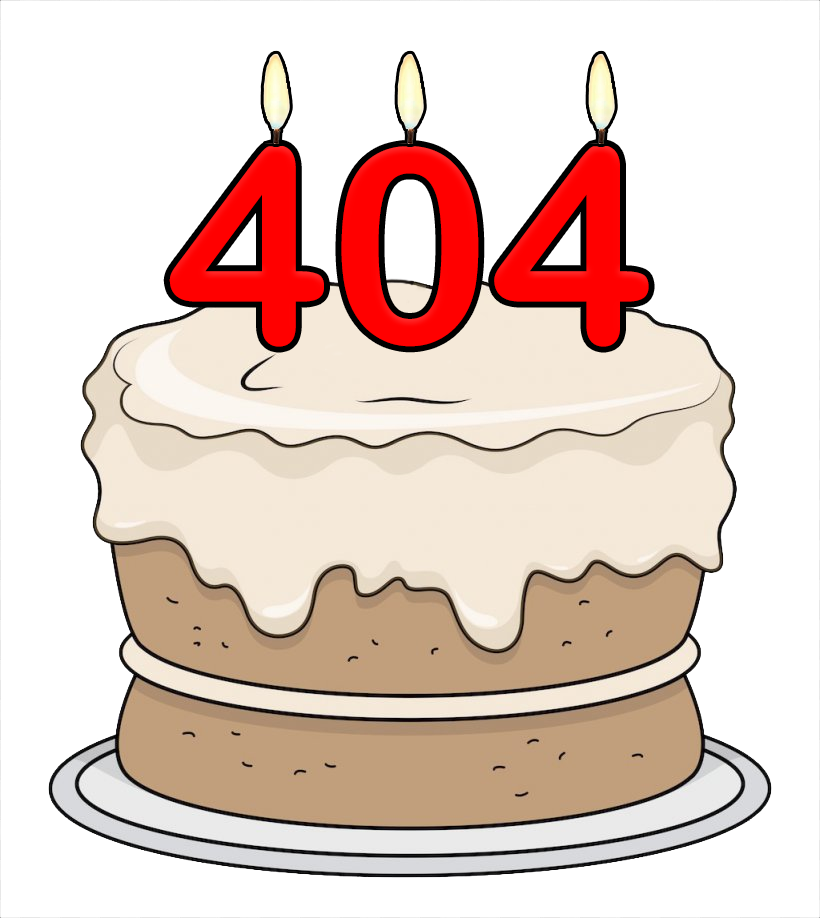
<style>
.page{position:relative;width:820px;height:918px;background:#ffffff}
.page>*{position:absolute;margin:0}
.t1{font:273px "ArialRoundedMTBold";color:#ff0000}
</style>
<div class="page">
<p class="t1" style="left:169px;top:145px;width:480px;height:202px">404</p>
</div>
